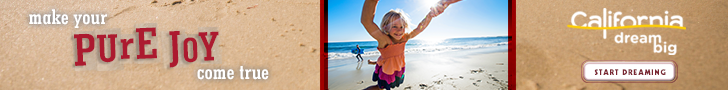
<style>
.page{position:relative;width:728px;height:90px}
.page>*{position:absolute;margin:0}
.t1{font:21.5px "GeometricSlab703BT-BoldCond";letter-spacing:0.015em;color:#ffffff}
.t2{font:45.1px "GeometricSlab703BT-BoldCond";letter-spacing:0.02em;color:#ac1a2f}
.t3{font:46.5px "GeometricSlab703BT-BoldCond";letter-spacing:0.02em;color:#ac1a2f}
.t4{font:39.8px "GeometricSlab703BT-BoldCond";letter-spacing:0.02em;color:#ac1a2f}
.t5{font:45px "GeometricSlab703BT-BoldCond";letter-spacing:0.02em;color:#ac1a2f}
.t6{font:35px "GeometricSlab703BT-BoldCond";letter-spacing:0.02em;color:#ac1a2f}
.t7{font:42px "GeometricSlab703BT-BoldCond";letter-spacing:0.02em;color:#ac1a2f}
.t8{font:7.8px "Geometric231BT-HeavyC";letter-spacing:0.1em;color:#7a2531}
</style>
<div class="page">
<p class="t1" style="left:29px;top:9px;width:78px;height:19px">make your</p>
<p class="t2" style="left:74px;top:27px;width:145px;height:41px;rotate:-2deg"><span class="t3">P</span><span class="t4">U</span>rE <span class="t5">J</span><span class="t6">O</span><span class="t7">Y</span></p>
<p class="t1" style="left:197px;top:66px;width:72px;height:14px">come true</p>
<p class="t8" style="left:594px;top:69px;width:72px;height:6px">START DREAMING</p>
</div>
